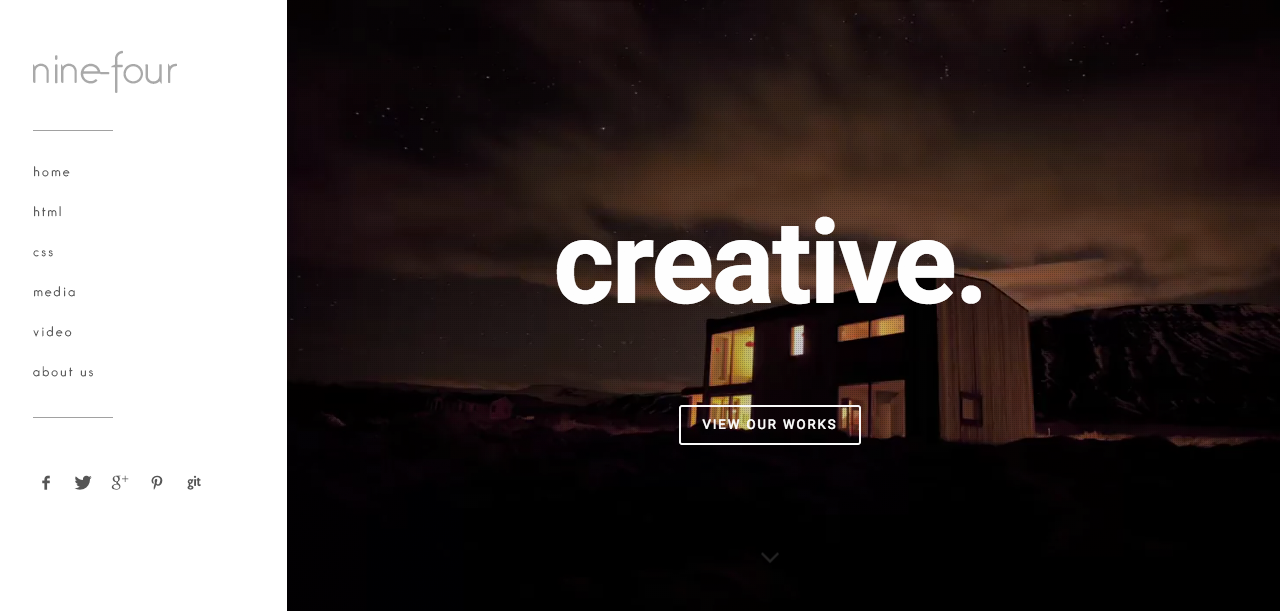
<style>
.page{position:relative;width:1280px;height:611px;background:#ffffff}
.page>*{position:absolute;margin:0}
.t1{font:40px "Das_Gitter";color:#aaaaaa}
.t2{font:12px "Das_Gitter";letter-spacing:0.2em;color:#4a4a4a}
.t3{font:12px "Das_Gitter";letter-spacing:0.2em}
</style>
<div class="page">
<p class="t1" style="left:33px;top:50px;width:144px;height:43px">nine-four</p>
<p class="t2" style="left:34px;top:166px;width:36px;height:11px">home</p>
<p class="t2" style="left:34px;top:206px;width:27px;height:11px">html</p>
<p class="t3" style="left:33px;top:250px;width:20px;height:7px">css</p>
<p class="t2" style="left:34px;top:286px;width:41px;height:11px">media</p>
<p class="t2" style="left:33px;top:326px;width:39px;height:11px">video</p>
<p class="t2" style="left:33px;top:366px;width:60px;height:11px">about us</p>
</div>
